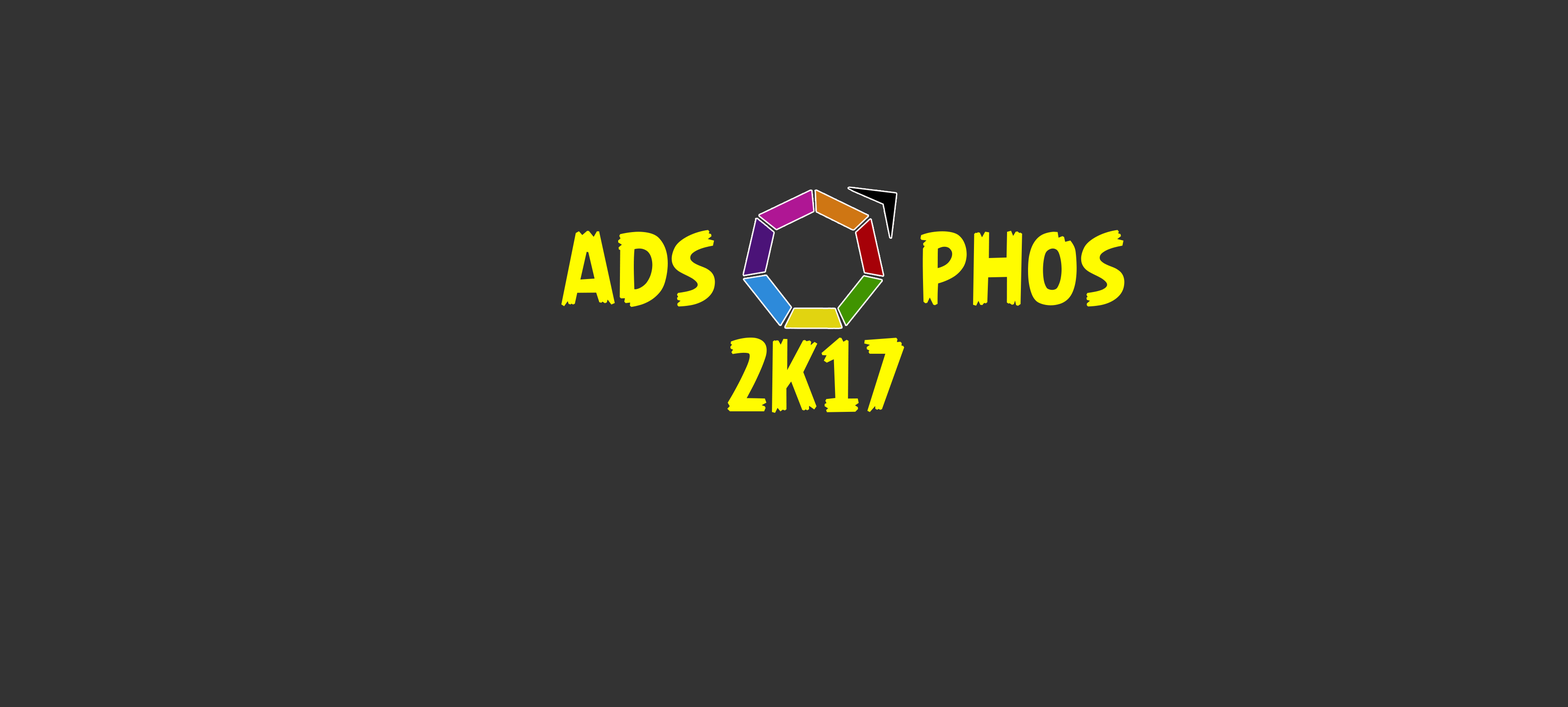
<style>
.page{position:relative;width:1568px;height:707px;background:#333333}
.page>*{position:absolute;margin:0}
.t1{font:89.4px "AngryBirds-Regular";color:#fffc00;font-weight:bold}
</style>
<div class="page">
<p class="t1" style="left:561px;top:230px;width:564px;height:183px">ADS          PHOS<br>                           2K17</p>
</div>
